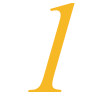
<style>
.page{position:relative;width:110px;height:100px;background:#ffffff}
.page>*{position:absolute;margin:0}
.t1{font:130.9px "TimesNewRomanPS-ItalicMT";color:#f7b826}
</style>
<div class="page">
<p class="t1" style="left:27px;top:3px;width:48px;height:89px">1</p>
</div>
